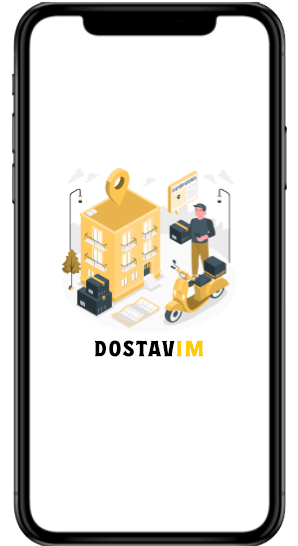
<style>
.page{position:relative;width:298px;height:546px;background:#ffffff}
.page>*{position:absolute;margin:0}
.t1{font:18.7px "Espiritu-Regular";letter-spacing:0.1em;color:#000000}
.t2{font:18.7px "Espiritu-Regular";letter-spacing:0.1em;color:#ffcc00}
</style>
<div class="page">
<p class="t1" style="left:94px;top:340px;width:110px;height:17px">DOSTAV<span class="t2">IM</span></p>
</div>
